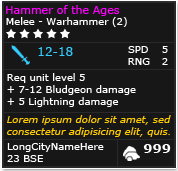
<style>
.page{position:relative;width:178px;height:171px;background:#171717}
.page>*{position:absolute;margin:0}
.t1{font:11px "Verdana";color:#ff00ff}
.t2{font:10px "Verdana";color:#ffffff}
.t3{font:12px "Verdana";color:#33ccff}
.t4{font:10px/12px "Verdana";color:#ffffff}
.t5{font:10px/12px "Verdana-Italic";color:#ffcc00}
.t6{font:13px "Verdana-Bold";color:#ffffff}
</style>
<div class="page">
<p class="t1" style="left:6px;top:5px;width:114px;height:11px">Hammer of the Ages</p>
<p class="t2" style="left:6px;top:17px;width:121px;height:10px">Melee - Warhammer (2)</p>
<p class="t3" style="left:38px;top:47px;width:35px;height:9px">12-18</p>
<p class="t2" style="left:128px;top:46px;width:20px;height:7px">SPD</p>
<p class="t2" style="left:162px;top:46px;width:6px;height:7px">5</p>
<p class="t2" style="left:128px;top:58px;width:22px;height:7px">RNG</p>
<p class="t2" style="left:162px;top:58px;width:6px;height:7px">2</p>
<p class="t4" style="left:7px;top:73px;width:129px;height:34px">Req unit level 5<br>+ 7-12 Bludgeon damage<br>+ 5 Lightning damage</p>
<p class="t5" style="left:7px;top:115px;width:164px;height:22px">Lorem ipsum dolor sit amet, sed <br>consectetur adipisicing elit, quis.</p>
<p class="t4" style="left:7px;top:143px;width:97px;height:19px">LongCityNameHere<br>23 BSE</p>
<p class="t6" style="left:143px;top:144px;width:28px;height:9px">999</p>
</div>
